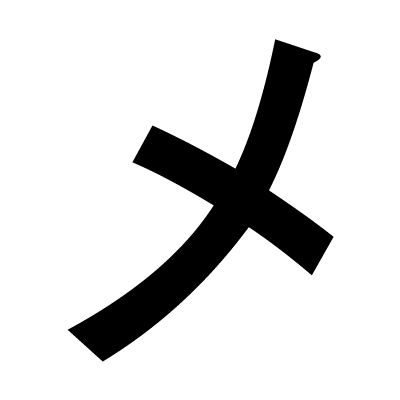
<style>
.page{position:relative;width:400px;height:400px;background:#ffffff}
.page>*{position:absolute;margin:0}
.t1{font:424.8px "MS-PGothic";color:#000000}
</style>
<div class="page">
<p class="t1" style="left:67px;top:39px;width:267px;height:323px">メ</p>
</div>
